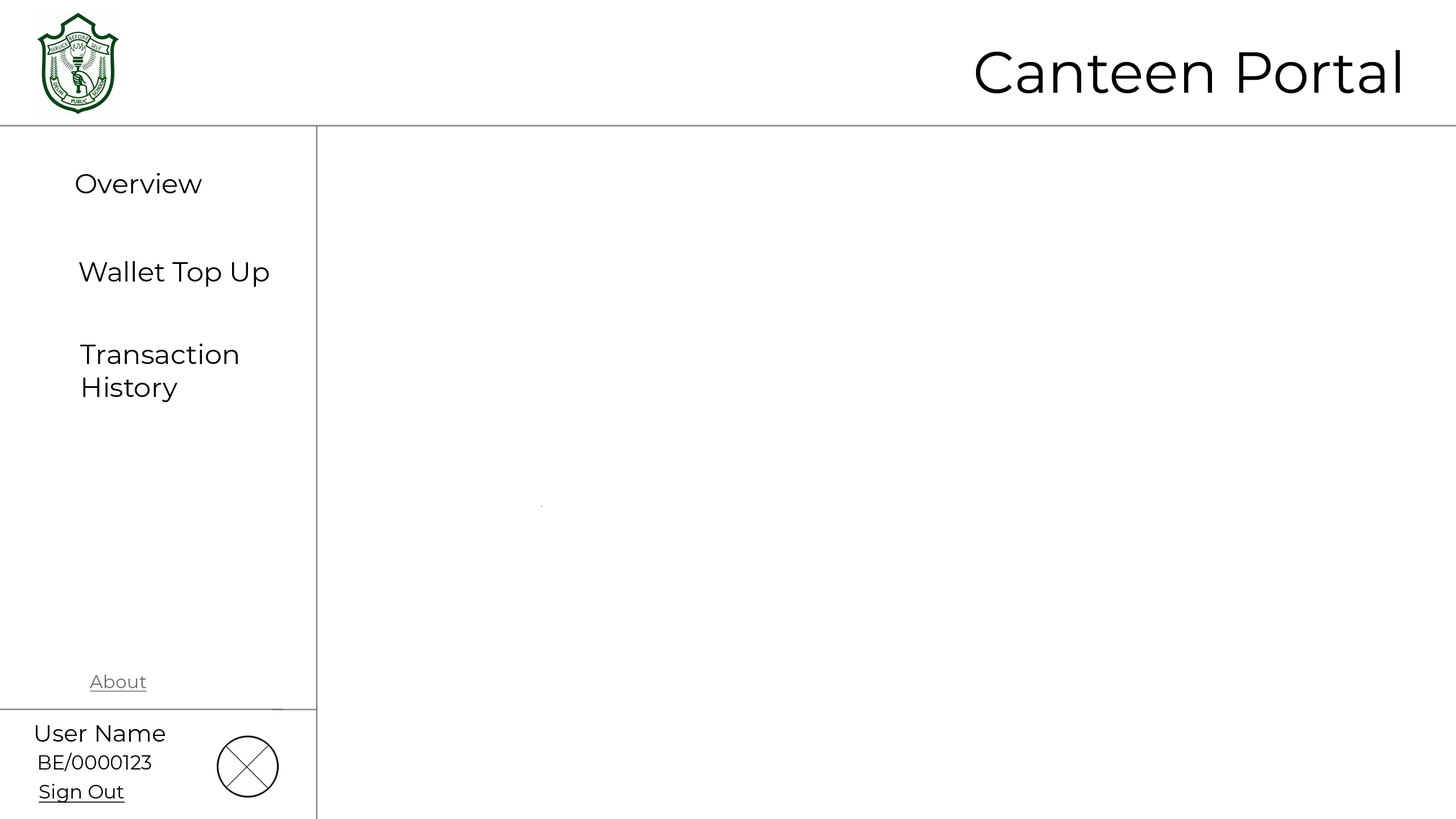
<style>
.page{position:relative;width:1456px;height:819px;background:#ffffff}
.page>*{position:absolute;margin:0}
.t1{font:57.4px "Montserrat-Regular";color:#000000}
.t2{font:27.3px "Montserrat-Regular";color:#000000}
.t3{font:18.2px "Montserrat-Regular";color:#6f6e6e;text-decoration:underline}
.t4{font:23.5px "Montserrat-Regular";color:#000000}
.t5{font:19.6px "Montserrat-Regular";color:#000000}
.t6{font:19.3px "Montserrat-Regular";color:#000000;text-decoration:underline}
</style>
<div class="page">
<p class="t1" style="left:976px;top:50px;width:424px;height:44px">Canteen Portal</p>
<p class="t2" style="left:76px;top:173px;width:126px;height:20px">Overview</p>
<p class="t2" style="left:79px;top:261px;width:190px;height:26px">Wallet Top Up</p>
<p class="t2" style="left:80px;top:344px;width:158px;height:58px">Transaction <br>History</p>
<p class="t3" style="left:90px;top:675px;width:57px;height:17px">About</p>
<p class="t4" style="left:36px;top:725px;width:129px;height:17px">User Name</p>
<p class="t5" style="left:39px;top:752px;width:112px;height:19px">BE/0000123</p>
<p class="t6" style="left:39px;top:784px;width:86px;height:19px">Sign Out</p>
</div>
